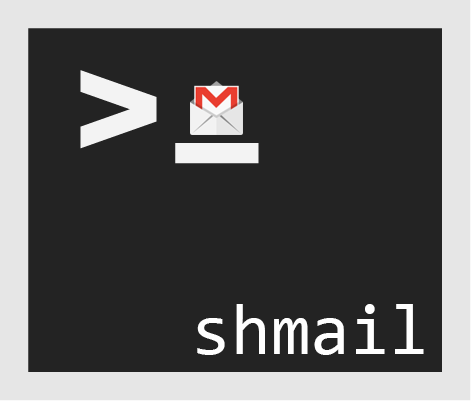
<style>
.page{position:relative;width:471px;height:401px;background:#232323}
.page>*{position:absolute;margin:0}
.t1{font:72px "Consolas";color:#ffffff}
</style>
<div class="page">
<p class="t1" style="left:197px;top:304px;width:227px;height:51px">shmail</p>
</div>
